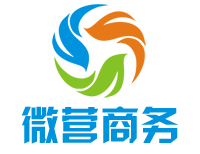
<style>
.page{position:relative;width:200px;height:154px;background:#ffffff}
.page>*{position:absolute;margin:0}
.t1{font:40px "JLinXin";color:#0093dd}
</style>
<div class="page">
<p class="t1" style="left:21px;top:106px;width:157px;height:38px">微营商务</p>
</div>
